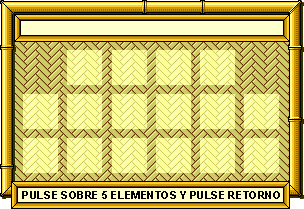
<style>
.page{position:relative;width:304px;height:209px;background:#cccc66}
.page>*{position:absolute;margin:0}
.t1{font:11.4px "Arial-BoldMT";color:#000000}
</style>
<div class="page">
<p class="t1" style="left:22px;top:191px;width:258px;height:8px">PULSE SOBRE 5 ELEMENTOS Y PULSE RETORNO</p>
</div>
